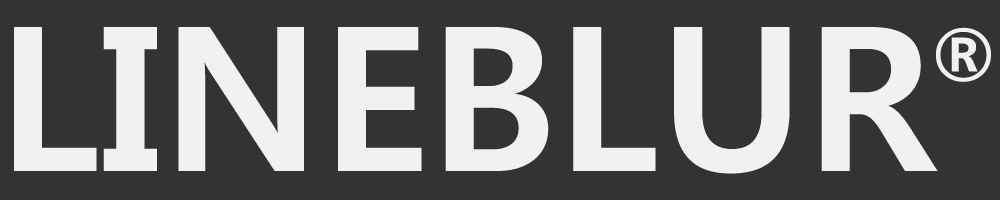
<style>
.page{position:relative;width:1000px;height:200px;background:#333333}
.page>*{position:absolute;margin:0}
.t1{font:200px "MalgunGothicBold";color:#f1f1f1}
.t2{font:72px "MalgunGothicBold";color:#f1f1f1}
</style>
<div class="page">
<p class="t1" style="left:14px;top:27px;width:924px;height:147px">LINEBLUR</p>
<p class="t2" style="left:936px;top:27px;width:55px;height:55px">®</p>
</div>
